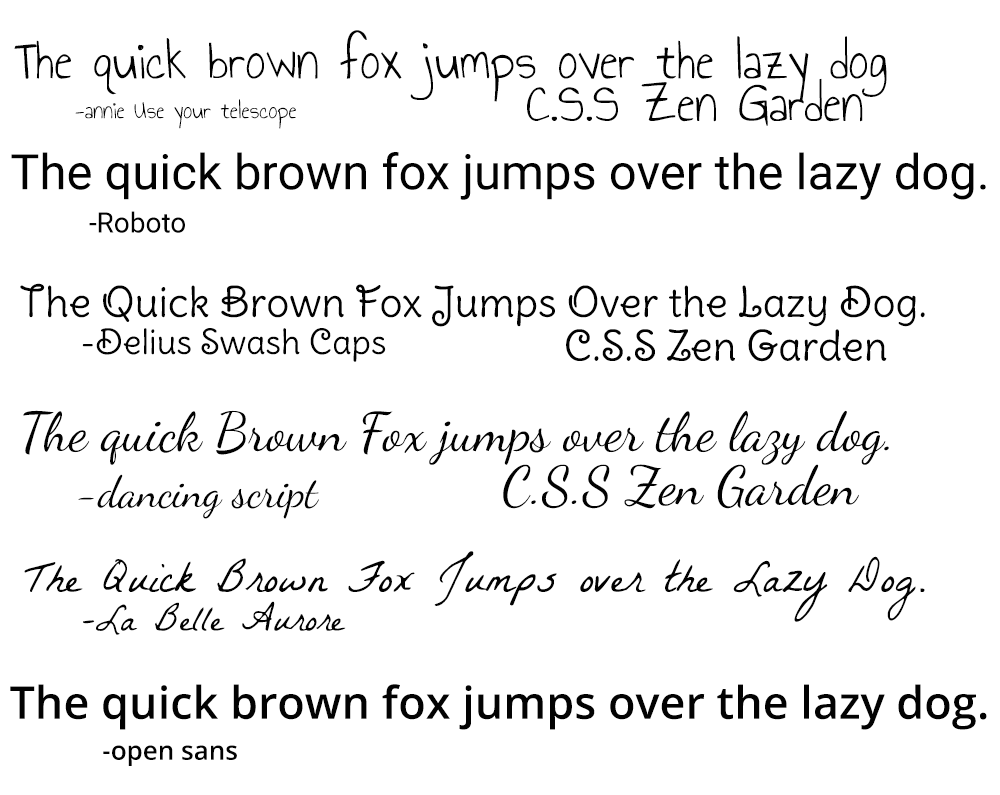
<style>
.page{position:relative;width:1000px;height:795px;background:#ffffff}
.page>*{position:absolute;margin:0}
.t1{font:56px "AnnieUseYourTelescope-Regular";color:#020202}
.t2{font:25px "AnnieUseYourTelescope-Regular";color:#020202}
.t3{font:49px "Roboto-Regular";color:#020202}
.t4{font:28px "Roboto-Regular";color:#020202}
.t5{font:41px "DeliusSwashCaps-Regular";color:#020202}
.t6{font:34px "DeliusSwashCaps-Regular";color:#020202}
.t7{font:54px "DancingScript-Regular";color:#020202}
.t8{font:44px "DancingScript-Regular";color:#020202}
.t9{font:44px "LaBelleAurore";color:#020202}
.t10{font:37px "LaBelleAurore";color:#020202}
.t11{font:45px "OpenSans-SemiBold";color:#020202}
.t12{font:26px "OpenSans-SemiBold";color:#020202}
</style>
<div class="page">
<p class="t1" style="left:14px;top:30px;width:873px;height:72px">The quick brown fox jumps over the lazy dog</p>
<p class="t1" style="left:527px;top:78px;width:336px;height:48px">C.S.S Zen Garden</p>
<p class="t2" style="left:75px;top:99px;width:221px;height:30px">-annie Use your telescope</p>
<p class="t3" style="left:11px;top:152px;width:975px;height:48px">The quick brown fox jumps over the lazy dog.</p>
<p class="t4" style="left:89px;top:211px;width:96px;height:22px">-Roboto</p>
<p class="t5" style="left:20px;top:283px;width:905px;height:44px">The Quick Brown Fox Jumps Over the Lazy Dog.</p>
<p class="t6" style="left:82px;top:328px;width:304px;height:34px">-Delius Swash Caps</p>
<p class="t5" style="left:566px;top:329px;width:321px;height:33px">C.S.S Zen Garden</p>
<p class="t7" style="left:23px;top:410px;width:866px;height:55px">The quick Brown Fox jumps over the lazy dog.</p>
<p class="t7" style="left:503px;top:464px;width:356px;height:45px">C.S.S Zen Garden</p>
<p class="t8" style="left:78px;top:474px;width:241px;height:45px">-dancing script</p>
<p class="t9" style="left:24px;top:551px;width:901px;height:71px">The Quick Brown Fox Jumps over the Lazy Dog.</p>
<p class="t10" style="left:83px;top:601px;width:263px;height:34px">-La Belle Aurore</p>
<p class="t11" style="left:10px;top:684px;width:977px;height:46px">The quick brown fox jumps over the lazy dog.</p>
<p class="t12" style="left:103px;top:745px;width:134px;height:21px">-open sans</p>
</div>
